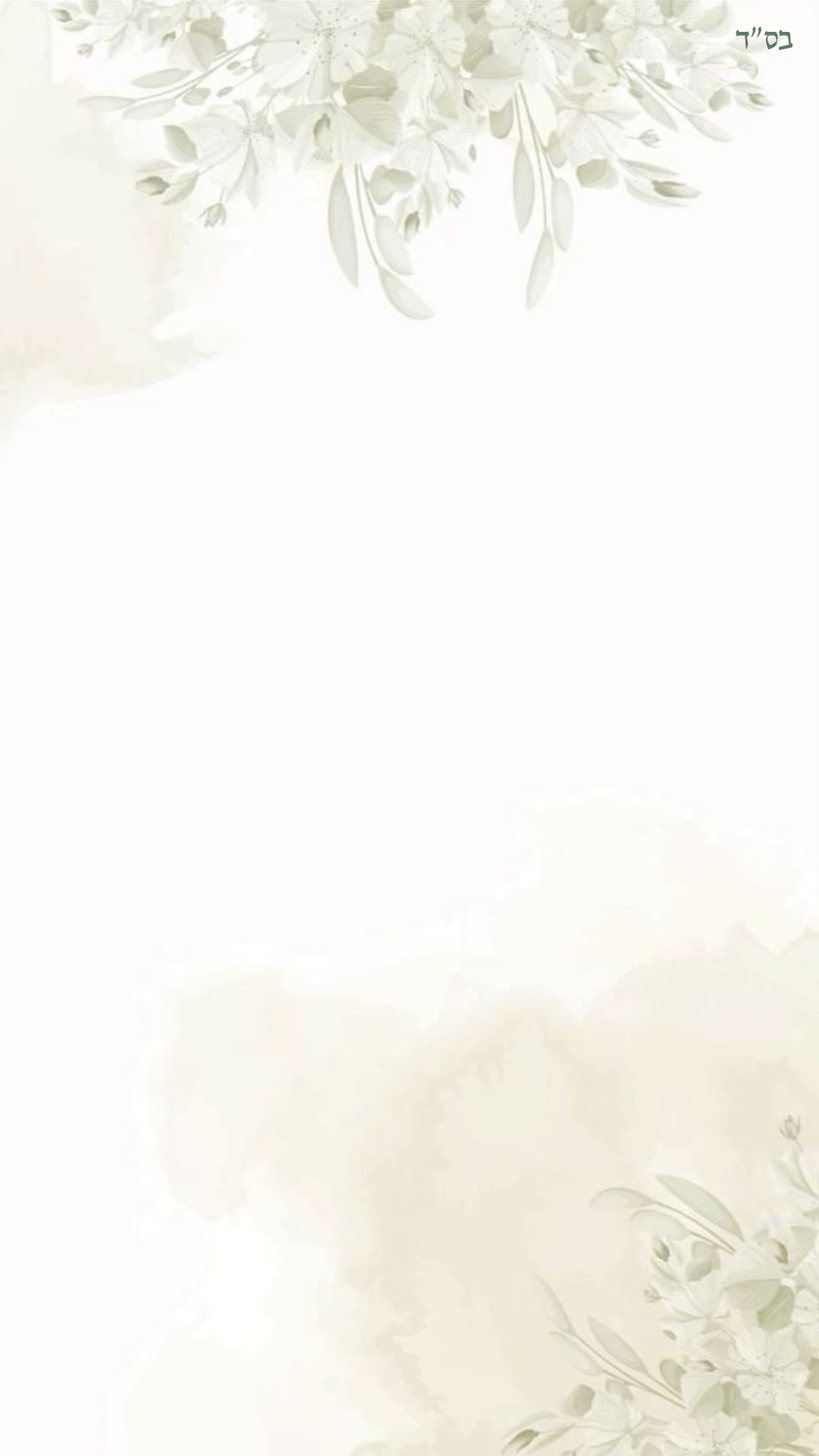
<style>
.page{position:relative;width:819px;height:1456px;background:#fefcfd}
.page>*{position:absolute;margin:0}
.t1{font:28.8px "GuttmanAram-Normal";color:#617968}
</style>
<div class="page">
<p class="t1" style="left:736px;top:26px;width:57px;height:25px">בס"ד</p>
</div>
